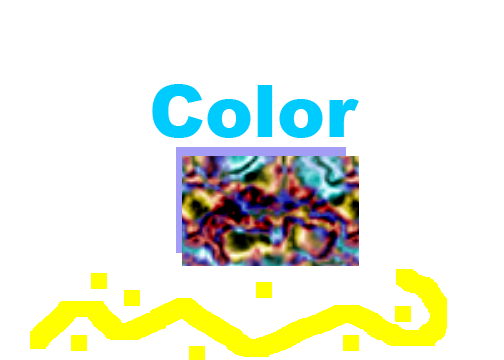
<style>
.page{position:relative;width:504px;height:360px;background:#ffffff}
.page>*{position:absolute;margin:0}
.t1{font:72px "Arial-Black";color:#00ccff}
</style>
<div class="page">
<p class="t1" style="left:152px;top:84px;width:207px;height:54px">Color</p>
</div>
